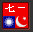
<style>
.page{position:relative;width:33px;height:32px;background:#f20000}
.page>*{position:absolute;margin:0}
.t1{font:10.4px "SimSun";color:#ffffff}
</style>
<div class="page">
<p class="t1" style="left:5px;top:4px;width:20px;height:8px">七一</p>
</div>
